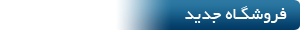
<style>
.page{position:relative;width:300px;height:30px;background:#ffffff}
.page>*{position:absolute;margin:0}
.t1{font:18.3px "BYekan";color:#ffffff}
</style>
<div class="page">
<p class="t1" style="left:185px;top:6px;width:102px;height:17px">فروشگـاه جدید</p>
</div>
